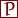
<style>
.page{position:relative;width:18px;height:18px;background:#ffffff}
.page>*{position:absolute;margin:0}
.t1{font:18px "Calligraphic421BT-RomanB";color:#740808}
</style>
<div class="page">
<p class="t1" style="left:4px;top:1px;width:11px;height:15px">P</p>
</div>
